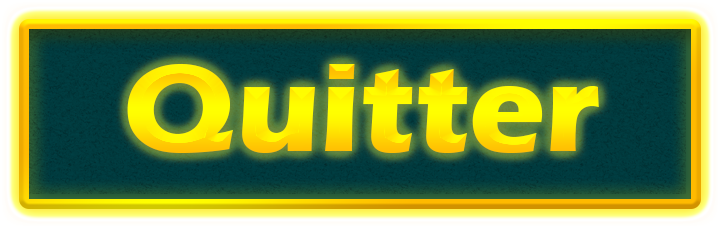
<style>
.page{position:relative;width:721px;height:229px}
.page>*{position:absolute;margin:0}
.t1{font:128.2px "ErasITC-Bold";color:#fffc00}
</style>
<div class="page">
<p class="t1" style="left:127px;top:64px;width:472px;height:89px">Quitter</p>
</div>
